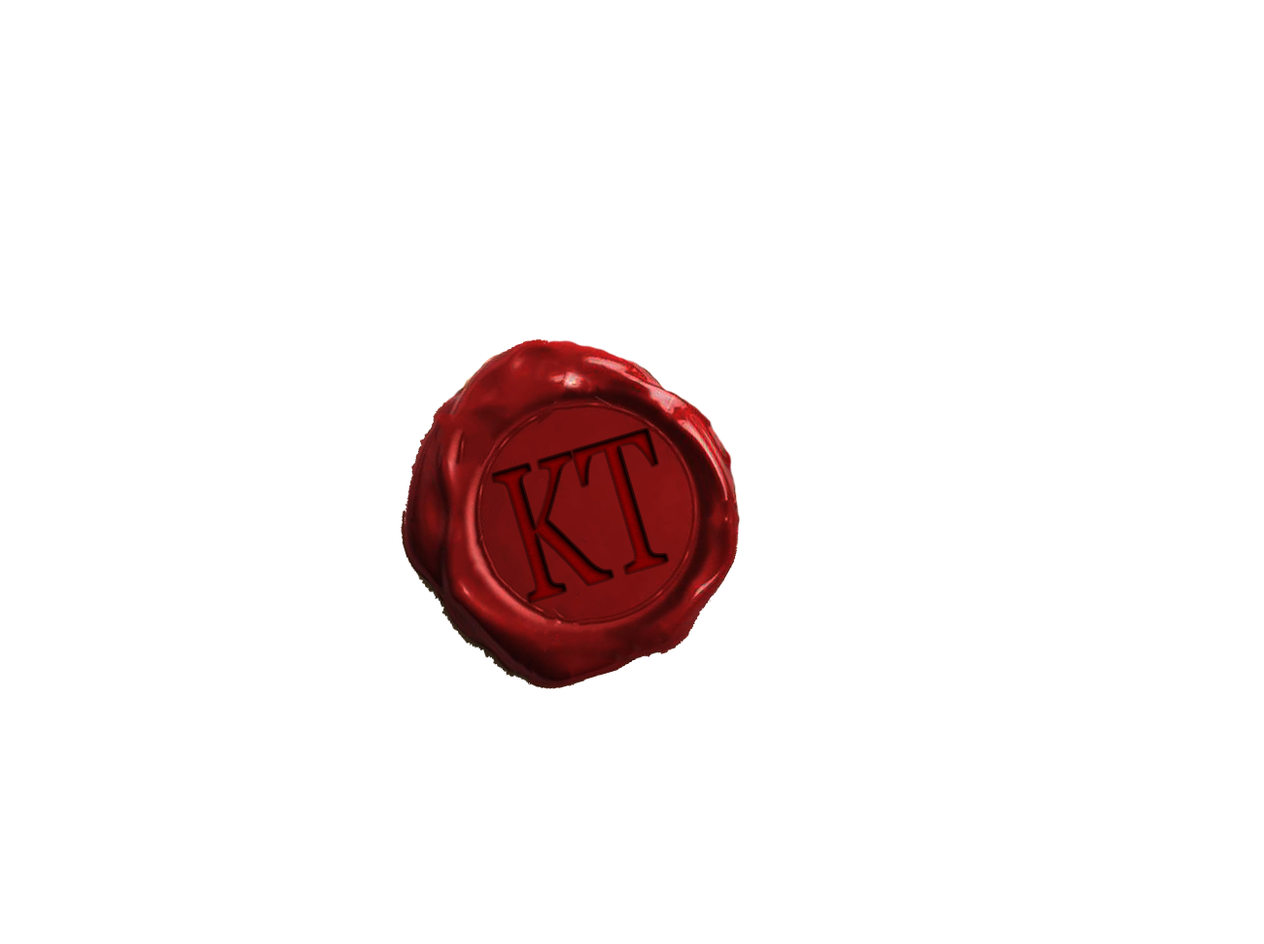
<style>
.page{position:relative;width:1264px;height:944px;background:#ffffff}
.page>*{position:absolute;margin:0}
.t1{font:190.4px "Georgia";scale:0.67 1}
</style>
<div class="page">
<p class="t1" style="left:492px;top:429px;width:176px;height:173px;rotate:-16deg">KT</p>
</div>
